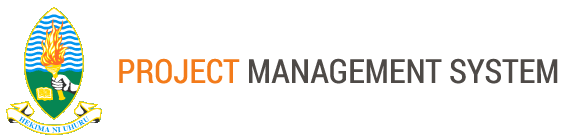
<style>
.page{position:relative;width:572px;height:139px;background:#ffffff}
.page>*{position:absolute;margin:0}
.t1{font:33.3px "RobotoCondensed-Regular";color:#4e4a47}
.t2{font:33.3px "RobotoCondensed-Regular";color:#f37b1a}
</style>
<div class="page">
<p class="t1" style="left:119px;top:58px;width:439px;height:26px"><span class="t2">PROJECT </span>MANAGEMENT SYSTEM</p>
</div>
